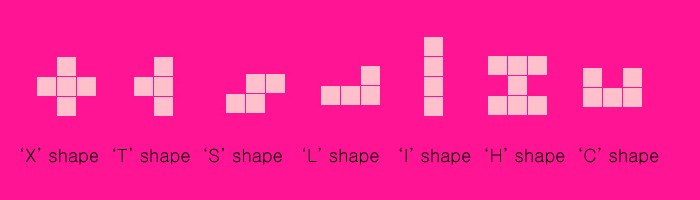
<style>
.page{position:relative;width:700px;height:200px;background:#ff1494}
.page>*{position:absolute;margin:0}
.t1{font:18px "Gulim";color:#000000}
</style>
<div class="page">
<p class="t1" style="left:21px;top:147px;width:638px;height:18px">‘X’ shape  ‘T’ shape  ‘S’ shape   ‘L’ shape   ‘I’ shape  ‘H’ shape  ‘C’ shape</p>
</div>
